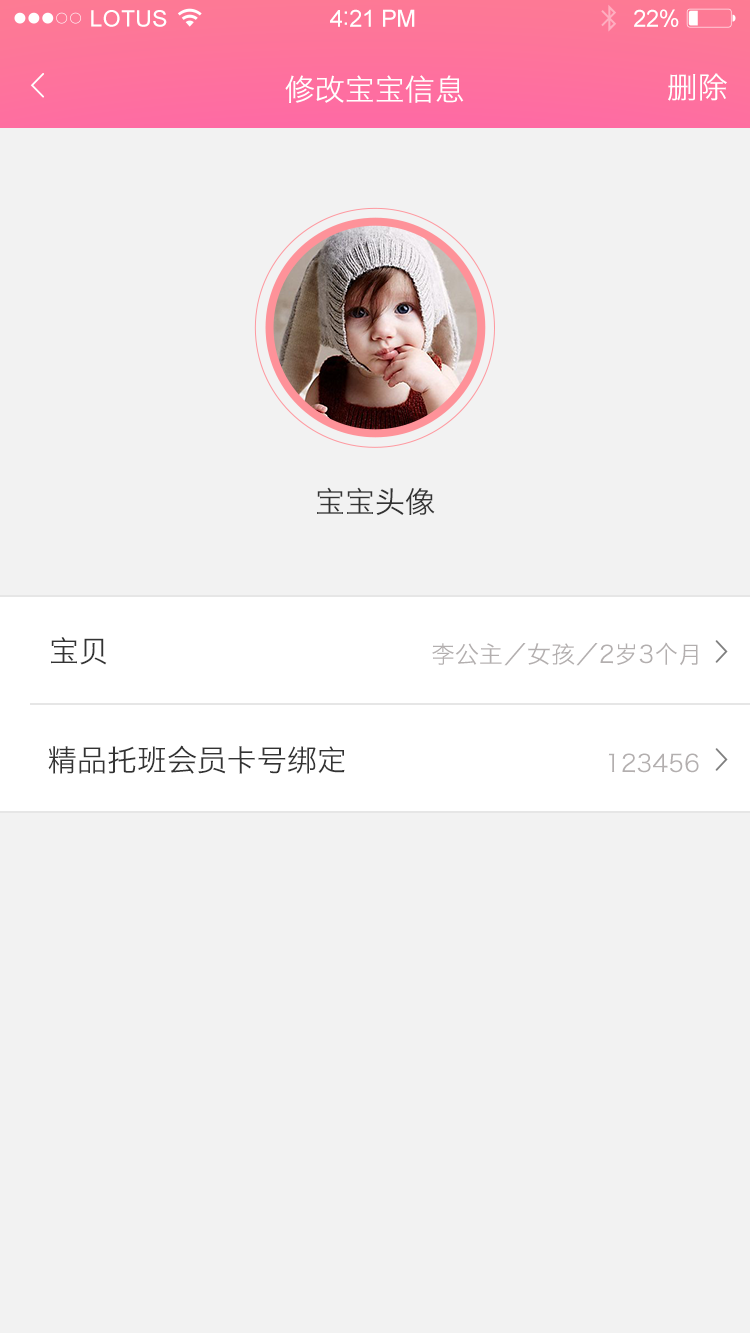
<style>
.page{position:relative;width:750px;height:1333px;background:#f2f2f2}
.page>*{position:absolute;margin:0}
.t1{font:22.6px "ArialMT";letter-spacing:0.02em;color:#ffffff}
.t2{font:23.6px "ArialMT";letter-spacing:-0.02em;color:#ffffff}
.t3{font:25.6px "ArialMT";letter-spacing:-0.02em;color:#ffffff}
.t4{font:30px "HiraginoSansGB-W3";color:#ffffff}
.t5{font:30px "HiraginoSansGB-W3";color:#333333}
.t6{font:24px "HiraginoSansGB-W3";color:#b3afaf}
</style>
<div class="page">
<p class="t1" style="left:91px;top:10px;width:76px;height:17px">LOTUS</p>
<p class="t2" style="left:330px;top:9px;width:85px;height:18px">4<span class="t3">:</span>21 PM</p>
<p class="t2" style="left:634px;top:9px;width:45px;height:18px">22%</p>
<p class="t4" style="left:285px;top:75px;width:179px;height:28px">修改宝宝信息</p>
<p class="t4" style="left:668px;top:73px;width:59px;height:28px">删除</p>
<p class="t5" style="left:317px;top:487px;width:118px;height:29px">宝宝头像</p>
<p class="t5" style="left:51px;top:637px;width:56px;height:28px">宝贝</p>
<p class="t6" style="left:432px;top:642px;width:266px;height:24px">李公主／女孩／2岁3个月</p>
<p class="t5" style="left:48px;top:745px;width:297px;height:29px">精品托班会员卡号绑定</p>
<p class="t6" style="left:608px;top:753px;width:91px;height:20px">123456</p>
</div>
